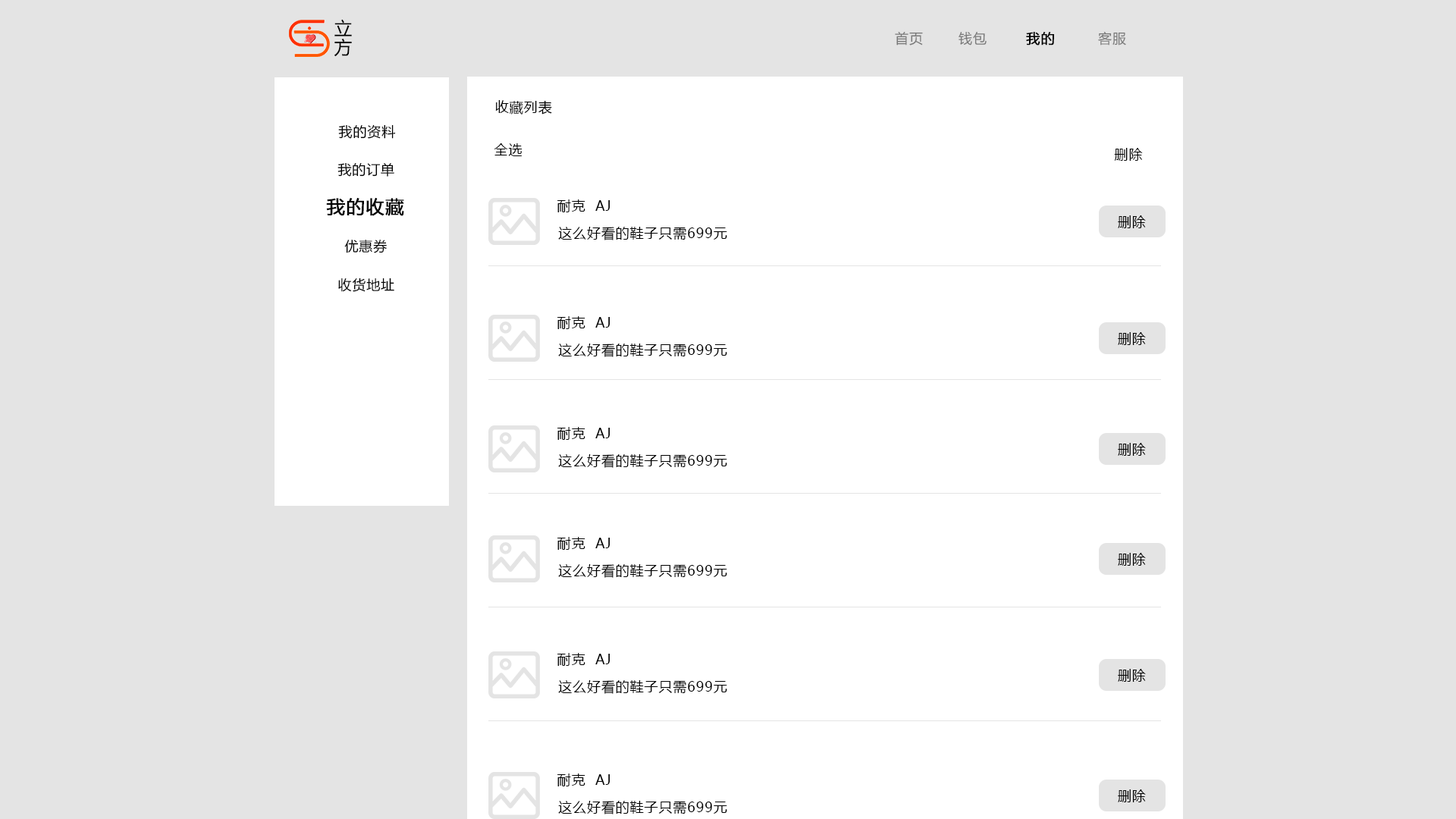
<style>
.page{position:relative;width:1456px;height:819px;background:#e4e4e4}
.page>*{position:absolute;margin:0}
.t1{font:18.2px/13.6px "MicrosoftYaHeiUI";letter-spacing:0.05em;color:#000000}
.t2{font:13.6px "MicrosoftYaHeiUI";letter-spacing:0.05em;color:#797979}
.t3{font:13.6px "MicrosoftYaHeiUI";letter-spacing:0.05em;color:#000000;font-weight:bold}
.t4{font:13.6px "MicrosoftYaHeiUI";letter-spacing:0.05em;color:#000000}
.t5{font:18.2px "MicrosoftYaHeiUI";letter-spacing:0.05em;color:#000000;font-weight:bold}
</style>
<div class="page">
<p class="t1" style="left:334px;top:19px;width:18px;height:38px">立方</p>
<p class="t2" style="left:895px;top:32px;width:28px;height:13px">首页</p>
<p class="t2" style="left:959px;top:32px;width:28px;height:13px">钱包</p>
<p class="t3" style="left:1026px;top:32px;width:28px;height:13px">我的</p>
<p class="t2" style="left:1098px;top:32px;width:28px;height:13px">客服</p>
<p class="t4" style="left:495px;top:100px;width:57px;height:15px">收藏列表</p>
<p class="t4" style="left:338px;top:124px;width:58px;height:15px">我的资料</p>
<p class="t4" style="left:494px;top:143px;width:28px;height:13px">全选</p>
<p class="t4" style="left:1114px;top:148px;width:29px;height:13px">删除</p>
<p class="t4" style="left:337px;top:163px;width:57px;height:14px">我的订单</p>
<p class="t5" style="left:326px;top:198px;width:78px;height:18px">我的收藏</p>
<p class="t4" style="left:557px;top:199px;width:53px;height:13px">耐克  AJ</p>
<p class="t4" style="left:1118px;top:215px;width:28px;height:13px">删除</p>
<p class="t4" style="left:558px;top:227px;width:169px;height:13px">这么好看的鞋子只需699元</p>
<p class="t4" style="left:344px;top:240px;width:43px;height:13px">优惠券</p>
<p class="t4" style="left:338px;top:278px;width:56px;height:14px">收货地址</p>
<p class="t4" style="left:557px;top:316px;width:53px;height:13px">耐克  AJ</p>
<p class="t4" style="left:1118px;top:332px;width:28px;height:13px">删除</p>
<p class="t4" style="left:558px;top:344px;width:169px;height:13px">这么好看的鞋子只需699元</p>
<p class="t4" style="left:557px;top:427px;width:53px;height:13px">耐克  AJ</p>
<p class="t4" style="left:1118px;top:443px;width:28px;height:13px">删除</p>
<p class="t4" style="left:558px;top:454px;width:169px;height:14px">这么好看的鞋子只需699元</p>
<p class="t4" style="left:557px;top:537px;width:53px;height:13px">耐克  AJ</p>
<p class="t4" style="left:1118px;top:553px;width:28px;height:13px">删除</p>
<p class="t4" style="left:558px;top:564px;width:169px;height:14px">这么好看的鞋子只需699元</p>
<p class="t4" style="left:557px;top:653px;width:53px;height:13px">耐克  AJ</p>
<p class="t4" style="left:1118px;top:669px;width:28px;height:13px">删除</p>
<p class="t4" style="left:558px;top:680px;width:169px;height:14px">这么好看的鞋子只需699元</p>
<p class="t4" style="left:557px;top:773px;width:53px;height:13px">耐克  AJ</p>
<p class="t4" style="left:1118px;top:789px;width:28px;height:13px">删除</p>
<p class="t4" style="left:558px;top:801px;width:169px;height:13px">这么好看的鞋子只需699元</p>
</div>
